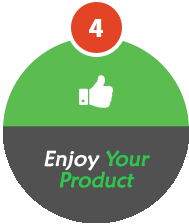
<style>
.page{position:relative;width:189px;height:224px;background:#ffffff}
.page>*{position:absolute;margin:0}
.t1{font:20.8px/1.5px "MaiandraGD-Regular";color:#2dc74e;font-weight:bold;font-style:italic}
.t2{font:20.8px/1.5px "MaiandraGD-Regular";color:#ffffff;font-variant:small-caps;font-weight:bold;font-style:italic}
.t3{font:20.8px/1.5px "MaiandraGD-Regular";color:#ffffff;font-weight:bold;font-style:italic}
</style>
<div class="page">
<p class="t1" style="left:44px;top:150px;width:106px;height:38px;text-align:center"><span class="t2">E</span><span class="t3">njoy </span>Your<br><br> <br><br><br><br><br><br><br><br><br><br><br><br>Product</p>
</div>
